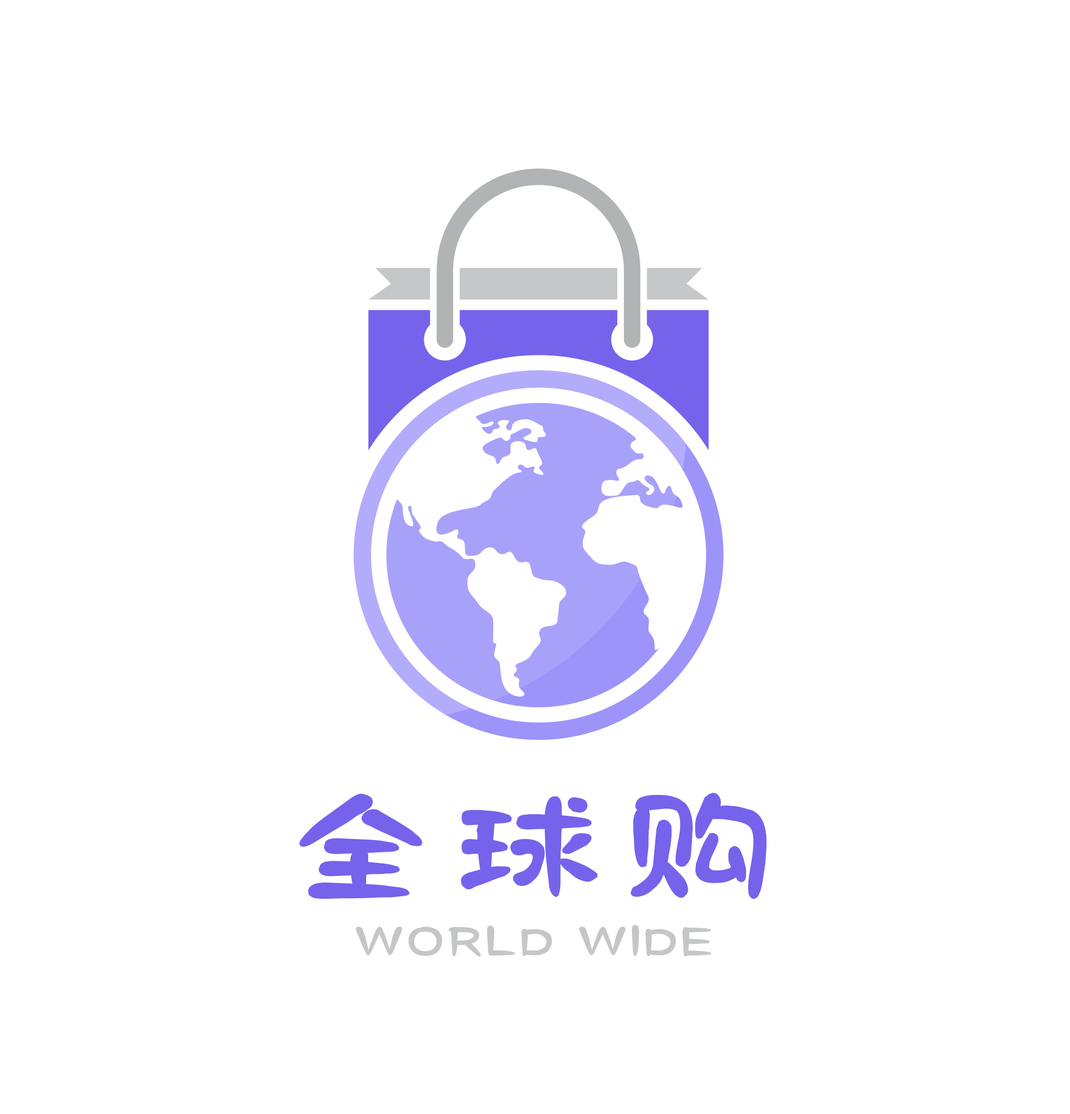
<style>
.page{position:relative;width:1070px;height:1114px;background:#ffffff}
.page>*{position:absolute;margin:0}
.t1{font:135.1px "baibianmading";color:#7563eb;text-transform:uppercase;scale:1.25 1}
.t2{font:49px "baibianmading";letter-spacing:0.06em;color:#c5c6c7;text-transform:uppercase;scale:1.25 1}
</style>
<div class="page">
<p class="t1" style="left:299px;top:793px;width:468px;height:106px">全球购</p>
<p class="t2" style="left:356px;top:925px;width:356px;height:32px">World wide</p>
</div>
